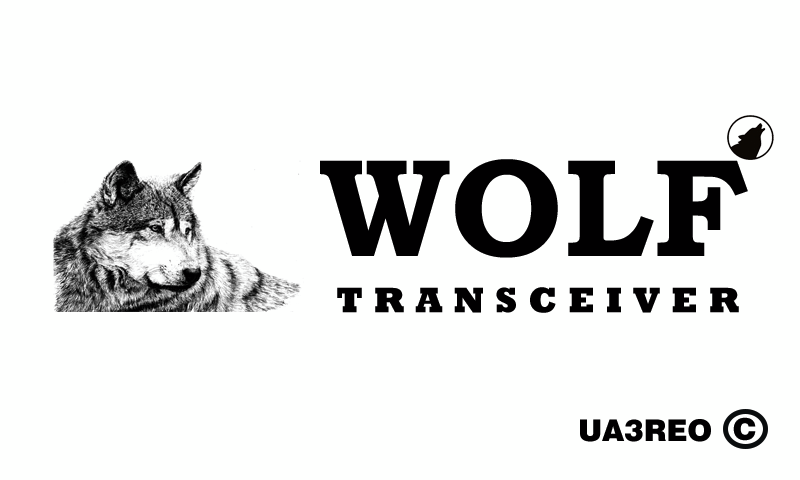
<style>
.page{position:relative;width:800px;height:480px;background:#fefffe}
.page>*{position:absolute;margin:0}
.t1{font:140px "BookmanOldStyle-Bold";color:#000000}
.t2{font:36px "Rockwell-ExtraBold";letter-spacing:0.3em;color:#000000}
.t3{font:30px "Swiss721BT-Black";color:#000000}
</style>
<div class="page">
<p class="t1" style="left:320px;top:159px;width:428px;height:99px">WOLF</p>
<p class="t2" style="left:337px;top:287px;width:402px;height:26px">TRANSCEIVER</p>
<p class="t3" style="left:580px;top:419px;width:131px;height:23px">UA3REO</p>
<p class="t3" style="left:733px;top:417px;width:23px;height:24px">C</p>
</div>
